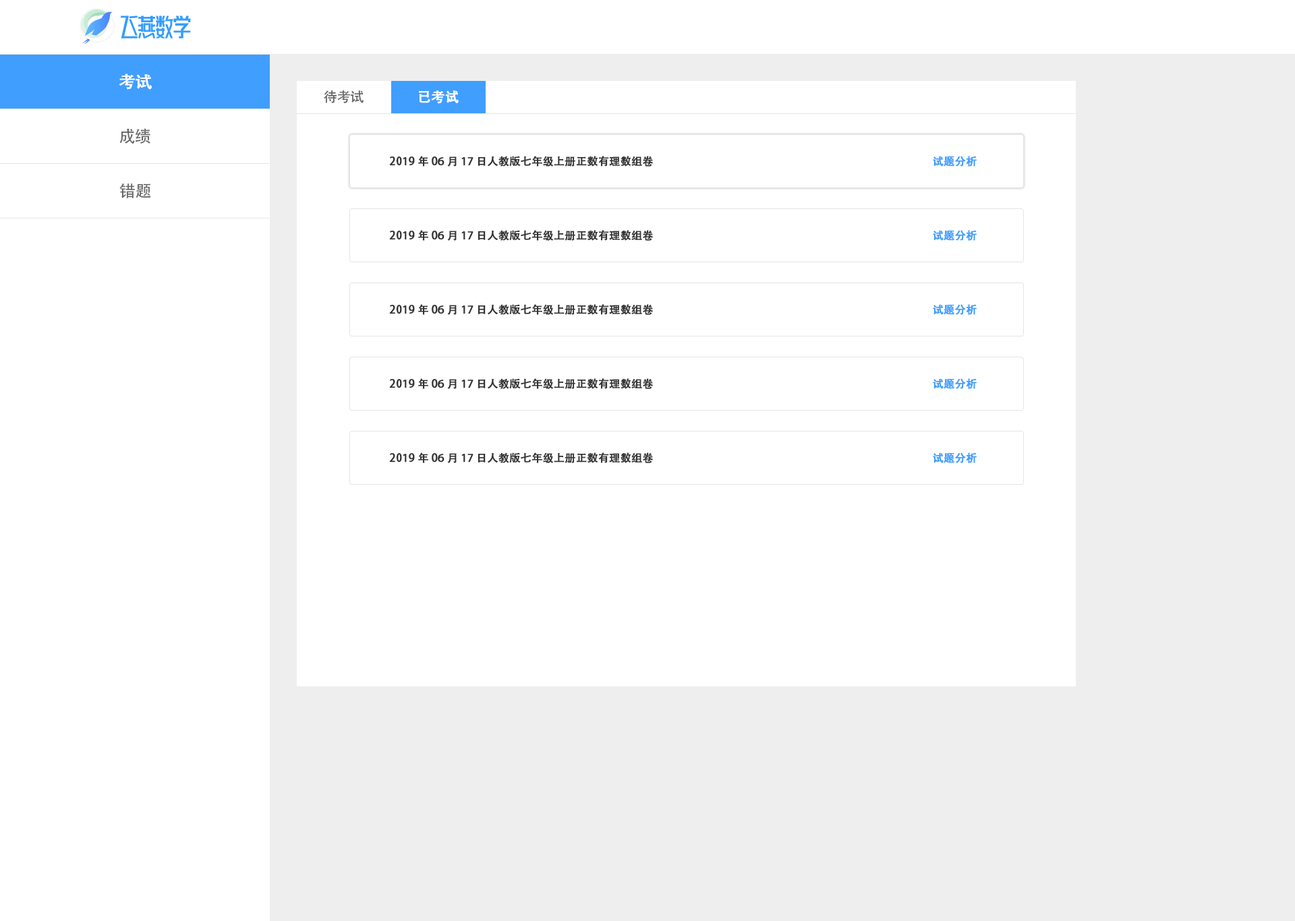
<style>
.page{position:relative;width:1295px;height:921px;background:#ffffff}
.page>*{position:absolute;margin:0}
.t1{font:16.2px "AdobeHeitiStd-Regular";color:#ffffff;font-weight:bold}
.t2{font:13.5px "AdobeHeitiStd-Regular";color:#666666}
.t3{font:13.5px "AdobeHeitiStd-Regular";color:#ffffff;font-weight:bold}
.t4{font:16.2px "AdobeHeitiStd-Regular";color:#666666}
.t5{font:10.8px "AdobeHeitiStd-Regular";color:#333333;font-weight:bold}
.t6{font:10.8px "AdobeHeitiStd-Regular";color:#409eff;font-weight:bold}
</style>
<div class="page">
<p class="t1" style="left:119px;top:73px;width:33px;height:17px">考试</p>
<p class="t2" style="left:324px;top:90px;width:39px;height:13px">待考试</p>
<p class="t3" style="left:419px;top:90px;width:40px;height:14px">已考试</p>
<p class="t4" style="left:119px;top:128px;width:31px;height:16px">成绩</p>
<p class="t5" style="left:389px;top:156px;width:264px;height:11px">2019年06月17日人教版七年级上册正数有理数组卷</p>
<p class="t6" style="left:933px;top:156px;width:43px;height:11px">试题分析</p>
<p class="t4" style="left:119px;top:183px;width:32px;height:15px">错题</p>
<p class="t5" style="left:389px;top:230px;width:264px;height:11px">2019年06月17日人教版七年级上册正数有理数组卷</p>
<p class="t6" style="left:933px;top:230px;width:43px;height:11px">试题分析</p>
<p class="t5" style="left:389px;top:304px;width:264px;height:11px">2019年06月17日人教版七年级上册正数有理数组卷</p>
<p class="t6" style="left:933px;top:304px;width:43px;height:11px">试题分析</p>
<p class="t5" style="left:389px;top:378px;width:264px;height:11px">2019年06月17日人教版七年级上册正数有理数组卷</p>
<p class="t6" style="left:933px;top:378px;width:43px;height:11px">试题分析</p>
<p class="t5" style="left:389px;top:452px;width:264px;height:11px">2019年06月17日人教版七年级上册正数有理数组卷</p>
<p class="t6" style="left:933px;top:452px;width:43px;height:11px">试题分析</p>
</div>
